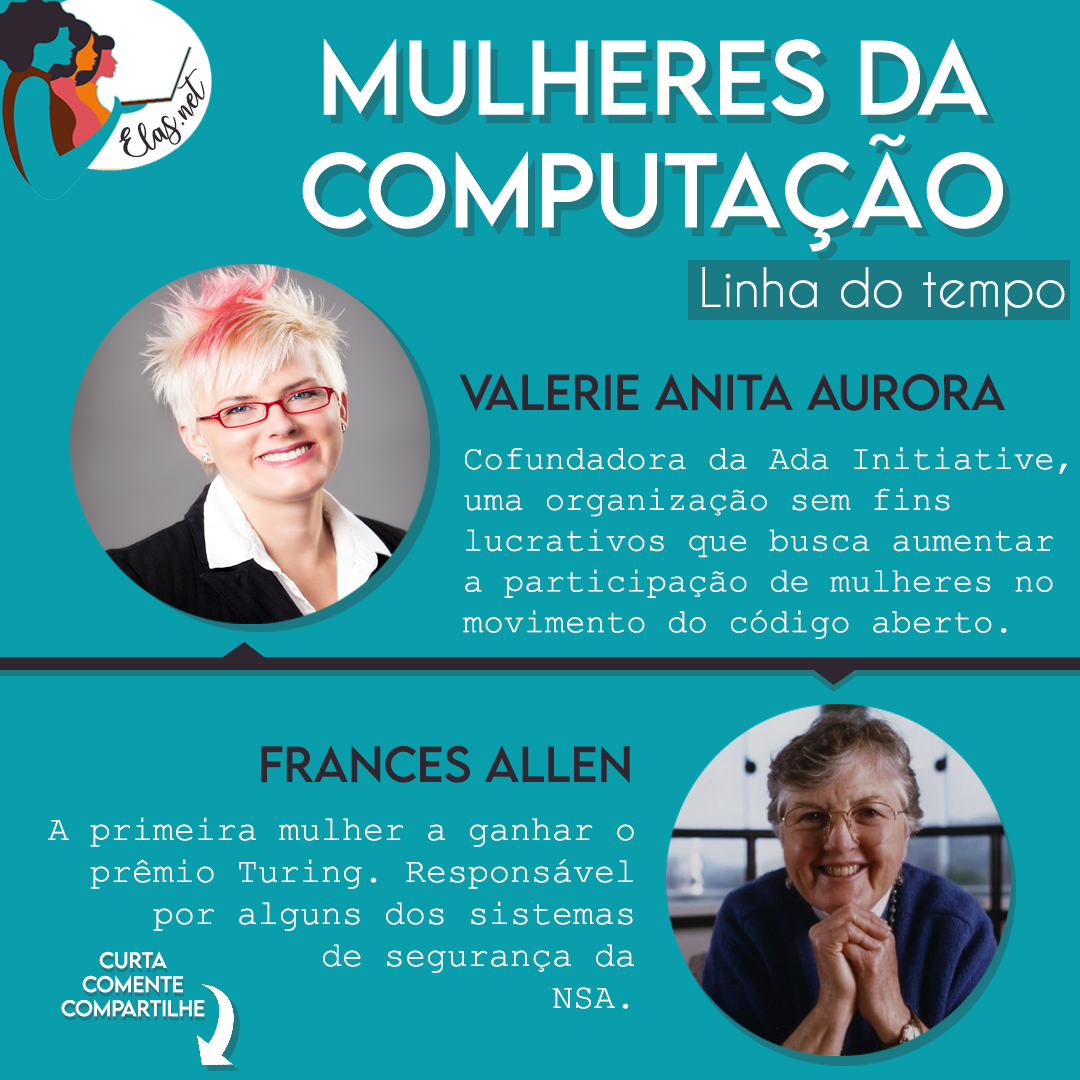
<style>
.page{position:relative;width:1080px;height:1080px;background:#0a9eac}
.page>*{position:absolute;margin:0}
.t1{font:25px "charlinda-Regular";color:#2f262f;scale:1.18 1}
.t2{font:51px "CaviarDreams";color:#ffffff}
.t3{font:45px "LEMONMILK-Regular";color:#2f262f}
.t4{font:34px "CourierNewPSMT";color:#ffffff}
.t5{font:35px "CourierNewPSMT";color:#ffffff}
.t6{font:20px "LEMONMILK-Regular";color:#ffffff}
</style>
<div class="page">
<p class="t1" style="left:119px;top:68px;width:86px;height:89px;rotate:-43deg">Elas.net</p>
<p class="t2" style="left:702px;top:267px;width:363px;height:50px">Linha do tempo</p>
<p class="t3" style="left:459px;top:373px;width:547px;height:38px">Valerie Anita Aurora</p>
<p class="t4" style="left:463px;top:447px;width:604px;height:192px">Cofundadora da Ada Initiative, <br>uma organização sem fins <br>lucrativos que busca aumentar <br>a participação de mulheres no <br>movimento do código aberto.</p>
<p class="t3" style="left:261px;top:745px;width:369px;height:38px">Frances Allen</p>
<p class="t5" style="left:48px;top:817px;width:586px;height:192px;text-align:right">A primeira mulher a ganhar o<br>prêmio Turing. Responsável<br>por alguns dos sistemas<br>de segurança da<br>NSA.</p>
<p class="t6" style="left:61px;top:951px;width:144px;height:66px;text-align:center">Curta<br>Comente<br>Compartilhe</p>
</div>
